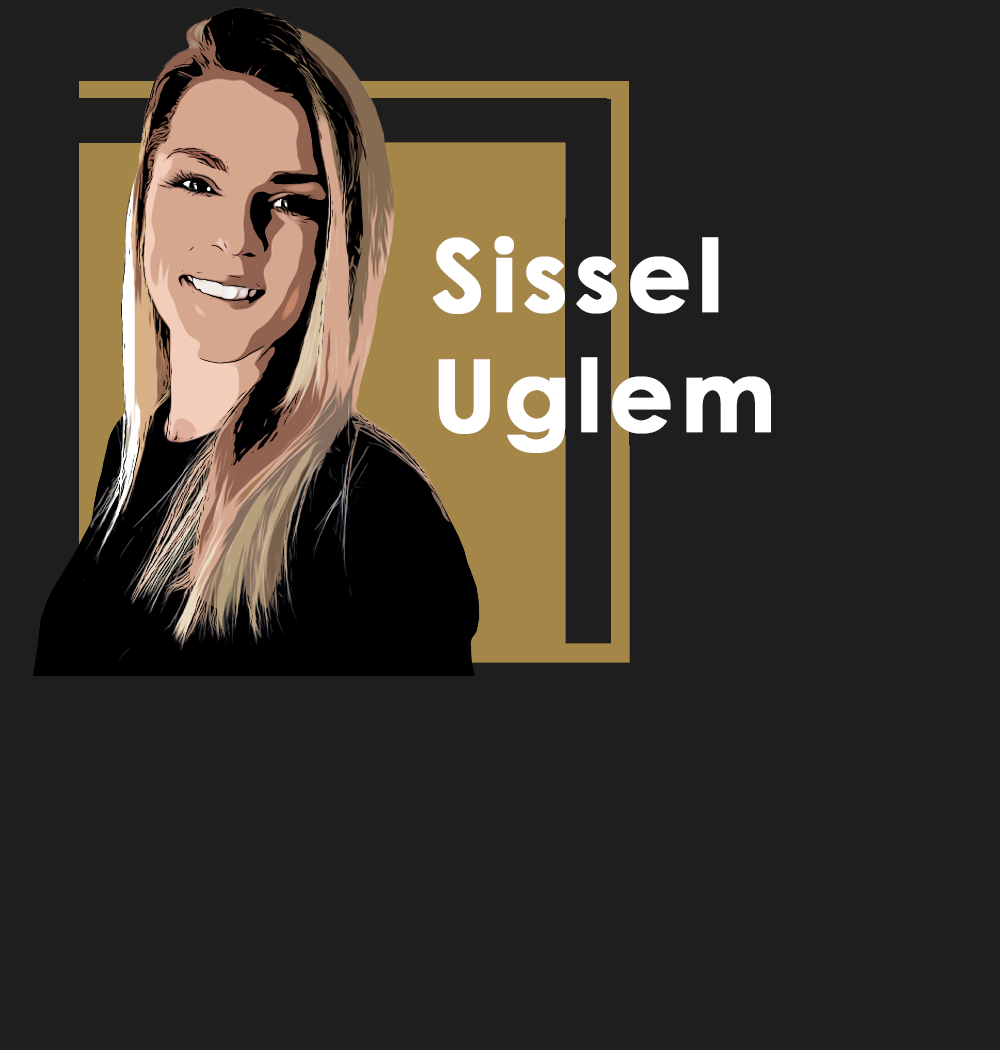
<style>
.page{position:relative;width:1000px;height:1050px;background:#1e1e1e}
.page>*{position:absolute;margin:0}
.t1{font:100px "CenturyGothic-Bold";letter-spacing:0.05em;color:#ffffff;font-weight:bold}
</style>
<div class="page">
<p class="t1" style="left:433px;top:236px;width:338px;height:217px">Sissel<br>Uglem</p>
</div>
